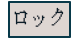
<style>
.page{position:relative;width:80px;height:40px;background:#ded6d2}
.page>*{position:absolute;margin:0}
.t1{font:20px "KH-Dot-kagurazaka-16";letter-spacing:0.12em;color:#0a192d}
</style>
<div class="page">
<p class="t1" style="left:14px;top:7px;width:50px;height:20px">ロック</p>
</div>
